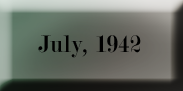
<style>
.page{position:relative;width:183px;height:91px}
.page>*{position:absolute;margin:0}
.t1{font:25.4px "Modern-Regular";color:#000000}
</style>
<div class="page">
<p class="t1" style="left:38px;top:35px;width:103px;height:23px">July, 1942</p>
</div>
